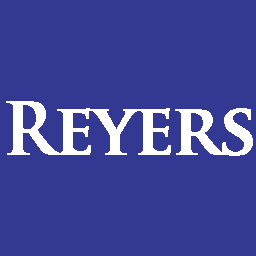
<style>
.page{position:relative;width:256px;height:256px;background:#333892}
.page>*{position:absolute;margin:0}
.t1{font:71px "TrajanPro-Bold";letter-spacing:-0.05em;color:#fffffd;font-weight:bold}
</style>
<div class="page">
<p class="t1" style="left:6px;top:101px;width:247px;height:55px">Reyers</p>
</div>
